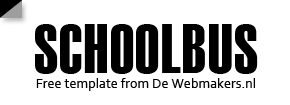
<style>
.page{position:relative;width:290px;height:105px;background:#ffffff}
.page>*{position:absolute;margin:0}
.t1{font:70px "Haettenschweiler";letter-spacing:0.025em;color:#000000;text-transform:uppercase;scale:0.9 1}
.t2{font:14px "Corbel";letter-spacing:0.005em;color:#000000}
</style>
<div class="page">
<p class="t1" style="left:35px;top:24px;width:223px;height:50px">Schoolbus</p>
<p class="t2" style="left:36px;top:78px;width:219px;height:13px">Free template from De Webmakers.nl</p>
</div>
